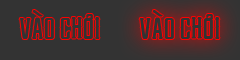
<style>
.page{position:relative;width:240px;height:60px;background:#333333}
.page>*{position:absolute;margin:0}
.t1{font:29.2px "TUVBenchmark";color:#333333}
</style>
<div class="page">
<p class="t1" style="left:19px;top:10px;width:81px;height:29px">Vào Chơi</p>
<p class="t1" style="left:139px;top:10px;width:81px;height:29px">Vào Chơi</p>
</div>
